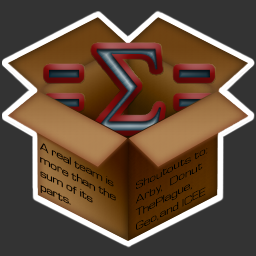
<style>
.page{position:relative;width:256px;height:256px;background:#333333}
.page>*{position:absolute;margin:0}
.t1{font:11.3px "WaukeganLDOExtended";color:#000000;scale:1.11 1}
.t2{font:11.3px "WaukeganLDOExtended";color:#000000;scale:1.12 1}
</style>
<div class="page">
<p class="t1" style="left:40px;top:143px;width:76px;height:62px;rotate:27deg">A real team is more than the sum of its parts.</p>
<p class="t2" style="left:135px;top:148px;width:73px;height:82px;rotate:-28deg">Shoutouts to:<br>Arby,   Donut<br>ThePlague,<br>Geo, and ICEE</p>
</div>
